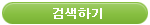
<style>
.page{position:relative;width:150px;height:25px;background:#ffffff}
.page>*{position:absolute;margin:0}
.t1{font:12px "Dotum";color:#ffffff;font-weight:bold}
</style>
<div class="page">
<p class="t1" style="left:53px;top:8px;width:49px;height:11px">검색하기</p>
</div>
